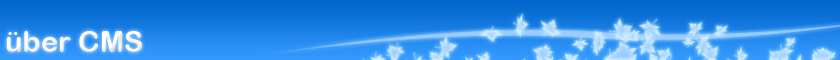
<style>
.page{position:relative;width:840px;height:60px}
.page>*{position:absolute;margin:0}
.t1{font:29.2px "ArialRoundedMTBold";color:#ffffff}
</style>
<div class="page">
<p class="t1" style="left:6px;top:31px;width:137px;height:21px">über CMS</p>
</div>
